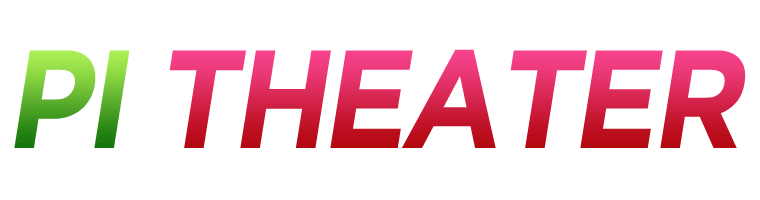
<style>
.page{position:relative;width:760px;height:200px;background:#ffffff}
.page>*{position:absolute;margin:0}
.t1{font:139.1px "Gotham-Bold";letter-spacing:-0.04em;font-style:italic;scale:0.9 1}
</style>
<div class="page">
<p class="t1" style="left:14px;top:49px;width:732px;height:99px">PI THEATER</p>
</div>
